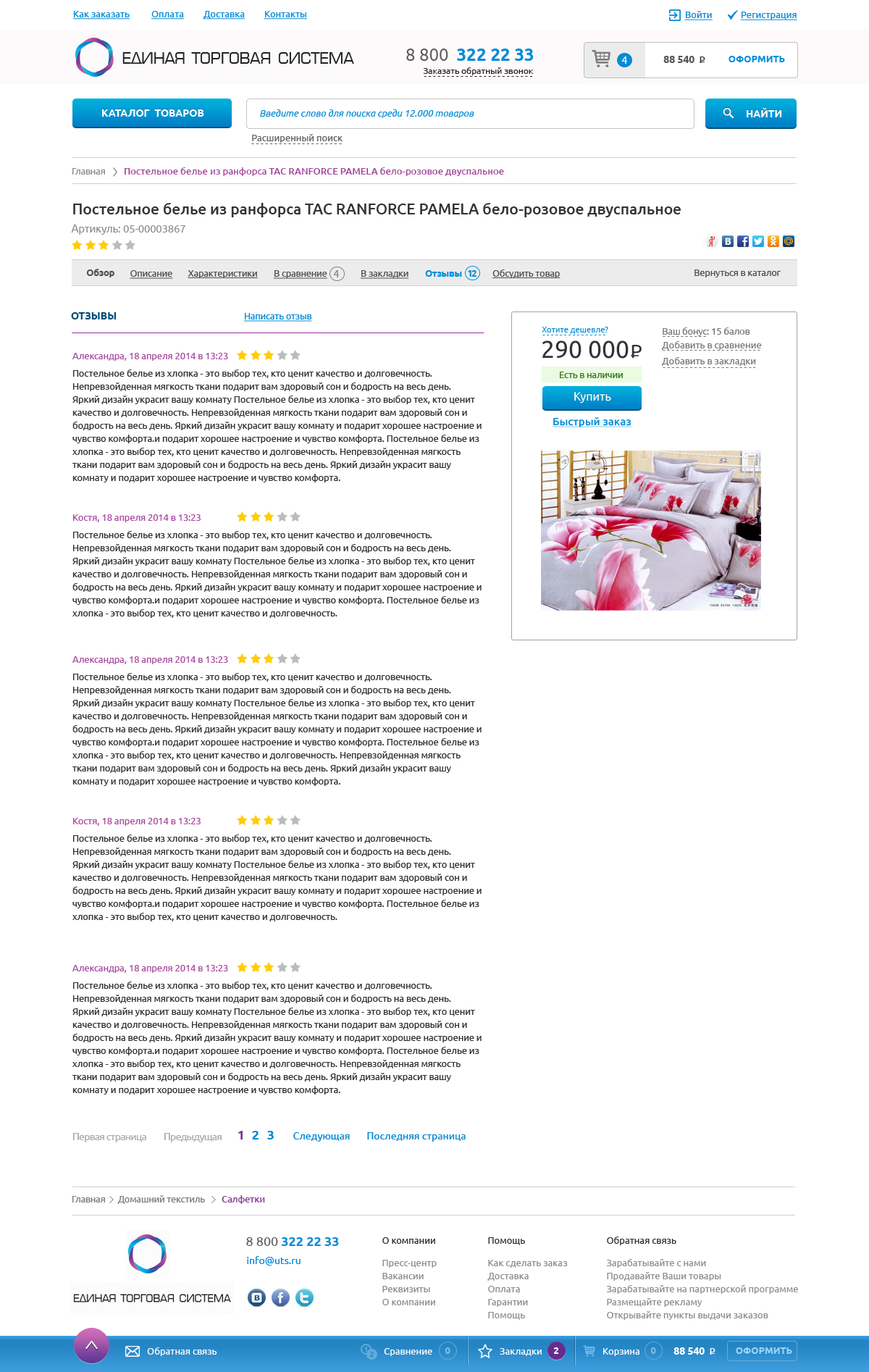
<style>
.page{position:relative;width:869px;height:1372px;background:#ffffff}
.page>*{position:absolute;margin:0}
.t1{font:9.4px "Ubuntu";color:#048bd5;text-decoration:underline}
.t2{font:9.4px "Ubuntu";color:#008bd5;text-decoration:underline}
.t3{font:17.4px "Ubuntu-Bold";color:#008cd9}
.t4{font:17.4px "Ubuntu";color:#5d5d5d}
.t5{font:10.1px "Ubuntu";color:#ffffff}
.t6{font:10.1px "Ubuntu-Bold";color:#585858}
.t7{font:9.4px "Ubuntu";color:#333333}
.t8{font:9.4px "Ubuntu-Bold";color:#008cd9;text-transform:uppercase}
.t9{font:8.7px "Ubuntu";color:#2a2a2a}
.t10{font:10.1px "Ubuntu-Bold";color:#ffffff;text-transform:uppercase}
.t11{font:9.4px "Ubuntu-Italic";color:#048bd5}
.t12{font:9.4px "Ubuntu";color:#626262}
.t13{font:8.7px "Ubuntu";color:#626262}
.t14{font:9.1px "Ubuntu";color:#8c8c8c}
.t15{font:9.4px "Ubuntu-Medium";color:#a3479b}
.t16{font:15.1px "Ubuntu-Medium";color:#333333}
.t17{font:10.5px "Ubuntu";color:#8c8c8c}
.t18{font:9.1px "Ubuntu-Bold";color:#505050}
.t19{font:9.1px "Ubuntu";color:#505050;text-decoration:underline}
.t20{font:9.1px "Ubuntu";color:#505050}
.t21{font:10.1px "Ubuntu";color:#838383}
.t22{font:9.1px "Ubuntu-Bold";color:#008cd9}
.t23{font:9.1px "Ubuntu-Bold";letter-spacing:-0.1em;color:#008cd9}
.t24{font:10.1px "Ubuntu-Bold";color:#014d76}
.t25{font:9.1px "Ubuntu";color:#008bd5;text-decoration:underline}
.t26{font:8.1px "Ubuntu";color:#008bd5}
.t27{font:9.1px "Ubuntu";color:#797979}
.t28{font:9.1px "Ubuntu-Medium";color:#797979}
.t29{font:24.1px "Ubuntu";color:#333333}
.t30{font:24.9px "Lato-Regular";color:#333333}
.t31{font:9.4px "Ubuntu";color:#797979}
.t32{font:9.4px "Ubuntu";letter-spacing:-0.025em;color:#797979}
.t33{font:9.1px/13px "Ubuntu";letter-spacing:0.01em;color:#333333}
.t34{font:9.1px/12.1px "Ubuntu";letter-spacing:0.01em;color:#aa4d9f}
.t35{font:9.1px/5.8px "Ubuntu";letter-spacing:0.01em;color:#333333}
.t36{font:18.6px "Ubuntu";color:#333333;scale:1.04 1}
.t37{font:15.1px "Ubuntu";scale:1.04 1}
.t38{font:9.1px "Ubuntu";color:#36771f}
.t39{font:12.4px "Ubuntu";color:#ffffff;scale:0.94 1}
.t40{font:12.4px "Ubuntu";color:#ffffff;text-transform:uppercase;scale:0.94 1}
.t41{font:10.6px "Ubuntu-Medium";color:#008bd5;text-decoration:underline}
.t42{font:10.1px "Ubuntu";letter-spacing:-0.05em;color:#ababab}
.t43{font:13px "Ubuntu-Bold";color:#753b90}
.t44{font:13px "Ubuntu-Bold";color:#0089d5}
.t45{font:10.1px "Ubuntu";color:#0087d1}
.t46{font:9.1px "Ubuntu";color:#7c7c7c}
.t47{font:9.1px "Ubuntu-Medium";color:#863d97}
.t48{font:13px "Ubuntu-Bold";color:#048bd5}
.t49{font:13px "Ubuntu";color:#5d5d5d}
.t50{font:9.4px/13px "Ubuntu";color:#8e8e8e}
.t51{font:9.4px/13px "Ubuntu";color:#323232}
.t52{font:10.1px "Ubuntu";color:#0289d7}
.t53{font:9.4px "Ubuntu";color:#ffffff}
.t54{font:7.2px "Ubuntu-Bold";color:#63abda}
.t55{font:9.4px "Ubuntu-Bold";color:#80bde5}
.t56{font:9.4px "Ubuntu-Bold";color:#ffffff}
.t57{font:10.1px "Ubuntu-Bold";color:#ffffff}
.t58{font:9.4px "Ubuntu-Bold";color:#9ad3f8;text-transform:uppercase}
.t59{font:7.2px "Ubuntu-Bold";color:#2586c4}
</style>
<div class="page">
<p class="t1" style="left:73px;top:11px;width:234px;height:9px"><span class="t2">Как заказать          </span>Оплата         Доставка         Контакты</p>
<p class="t1" style="left:684px;top:11px;width:29px;height:9px">Войти</p>
<p class="t1" style="left:740px;top:12px;width:57px;height:8px">Регистрация</p>
<p class="t3" style="left:406px;top:49px;width:128px;height:12px"><span class="t4">8 800  </span>322 22 33</p>
<p class="t5" style="left:621px;top:56px;width:6px;height:8px">4</p>
<p class="t6" style="left:663px;top:56px;width:32px;height:7px">88 540</p>
<p class="t7" style="left:700px;top:56px;width:5px;height:7px">P</p>
<p class="t7" style="left:700px;top:62px;width:5px;height:0px">_</p>
<p class="t8" style="left:729px;top:56px;width:56px;height:6px">Оформить</p>
<p class="t9" style="left:423px;top:67px;width:111px;height:8px">Заказать обратный звонок</p>
<p class="t9" style="left:424px;top:76px;width:109px;height:1px">- - - - - - - - - - - - - - - - - - - - - - - -</p>
<p class="t10" style="left:102px;top:109px;width:102px;height:8px">Каталог  товаров</p>
<p class="t11" style="left:260px;top:109px;width:214px;height:9px">Введите слово для поиска среди 12.000 товаров</p>
<p class="t10" style="left:747px;top:107px;width:35px;height:10px">НАЙТИ</p>
<p class="t12" style="left:252px;top:134px;width:91px;height:9px">Расширенный поиск</p>
<p class="t13" style="left:251px;top:143px;width:91px;height:1px">- - - - - - - - - - - - - - - - - - - -</p>
<p class="t14" style="left:72px;top:168px;width:33px;height:7px">Главная</p>
<p class="t15" style="left:125px;top:167px;width:379px;height:9px">Постельное белье из ранфорса TAC RANFORCE PAMELA бело-розовое двуспальное</p>
<p class="t16" style="left:73px;top:203px;width:608px;height:14px">Постельное белье из ранфорса TAC RANFORCE PAMELA бело-розовое двуспальное</p>
<p class="t17" style="left:71px;top:225px;width:114px;height:10px">Артикуль: 05-00003867</p>
<p class="t18" style="left:86px;top:269px;width:28px;height:8px">Обзор</p>
<p class="t19" style="left:493px;top:269px;width:68px;height:9px">Обсудить товар</p>
<p class="t20" style="left:695px;top:269px;width:86px;height:8px">Вернуться в каталог</p>
<p class="t19" style="left:130px;top:270px;width:43px;height:9px">Описание</p>
<p class="t19" style="left:188px;top:270px;width:70px;height:8px">Характеристики</p>
<p class="t19" style="left:274px;top:270px;width:53px;height:9px">В сравнение</p>
<p class="t21" style="left:333px;top:270px;width:6px;height:7px">4</p>
<p class="t19" style="left:361px;top:270px;width:48px;height:9px">В закладки</p>
<p class="t22" style="left:425px;top:270px;width:37px;height:7px">Отзывы</p>
<p class="t23" style="left:468px;top:270px;width:9px;height:7px">12</p>
<p class="t24" style="left:71px;top:312px;width:46px;height:7px">ОТЗЫВЫ</p>
<p class="t25" style="left:244px;top:313px;width:68px;height:9px">Написать отзыв</p>
<p class="t26" style="left:542px;top:327px;width:66px;height:7px">Хотите дешевле?</p>
<p class="t27" style="left:663px;top:327px;width:87px;height:9px">Ваш бонус: <span class="t28">15 балов</span></p>
<p class="t26" style="left:543px;top:335px;width:63px;height:0px">- - - - - - - - - - - - - - -</p>
<p class="t29" style="left:543px;top:340px;width:86px;height:19px"><span class="t30">   </span>290 000</p>
<p class="t31" style="left:662px;top:341px;width:100px;height:9px">Добавить в сравнение</p>
<p class="t32" style="left:663px;top:336px;width:43px;height:1px">- - - - - - - - - -</p>
<p class="t33" style="left:72px;top:353px;width:410px;height:129px"><span class="t34">Александра, 18 апреля 2014 в 13:23<br><br></span><span class="t35">Постельное белье из хлопка - это выбор тех, кто ценит качество и долговечность. </span>Непревзойденная мягкость ткани подарит вам здоровый сон и бодрость на весь день. <br>Яркий дизайн украсит вашу комнату Постельное белье из хлопка - это выбор тех, кто ценит качество и долговечность. Непревзойденная мягкость ткани подарит вам здоровый сон и бодрость на весь день. Яркий дизайн украсит вашу комнату и подарит хорошее настроение и чувство комфорта.и подарит хорошее настроение и чувство комфорта. Постельное белье из хлопка - это выбор тех, кто ценит качество и долговечность. Непревзойденная мягкость ткани подарит вам здоровый сон и бодрость на весь день. Яркий дизайн украсит вашу комнату и подарит хорошее настроение и чувство комфорта.</p>
<p class="t36" style="left:632px;top:345px;width:10px;height:13px">P</p>
<p class="t32" style="left:663px;top:350px;width:98px;height:1px">- - - - - - - - - - - - - - - - - - - - - -</p>
<p class="t37" style="left:631px;top:355px;width:8px;height:1px">_</p>
<p class="t31" style="left:662px;top:357px;width:94px;height:9px">Добавить в закладки</p>
<p class="t38" style="left:560px;top:372px;width:63px;height:6px">Есть в наличии</p>
<p class="t32" style="left:663px;top:367px;width:93px;height:1px">- - - - - - - - - - - - - - - - - - - - -</p>
<p class="t39" style="left:574px;top:392px;width:37px;height:11px"><span class="t40">К</span>упить</p>
<p class="t41" style="left:553px;top:417px;width:79px;height:10px">Быстрый заказ</p>
<p class="t33" style="left:72px;top:514px;width:410px;height:104px"><span class="t34">Костя, 18 апреля 2014 в 13:23<br><br></span><span class="t35">Постельное белье из хлопка - это выбор тех, кто ценит качество и долговечность. </span>Непревзойденная мягкость ткани подарит вам здоровый сон и бодрость на весь день. <br>Яркий дизайн украсит вашу комнату Постельное белье из хлопка - это выбор тех, кто ценит качество и долговечность. Непревзойденная мягкость ткани подарит вам здоровый сон и бодрость на весь день. Яркий дизайн украсит вашу комнату и подарит хорошее настроение и чувство комфорта.и подарит хорошее настроение и чувство комфорта. Постельное белье из хлопка - это выбор тех, кто ценит качество и долговечность.</p>
<p class="t33" style="left:72px;top:656px;width:410px;height:130px"><span class="t34">Александра, 18 апреля 2014 в 13:23<br><br></span><span class="t35">Постельное белье из хлопка - это выбор тех, кто ценит качество и долговечность. </span>Непревзойденная мягкость ткани подарит вам здоровый сон и бодрость на весь день. <br>Яркий дизайн украсит вашу комнату Постельное белье из хлопка - это выбор тех, кто ценит качество и долговечность. Непревзойденная мягкость ткани подарит вам здоровый сон и бодрость на весь день. Яркий дизайн украсит вашу комнату и подарит хорошее настроение и чувство комфорта.и подарит хорошее настроение и чувство комфорта. Постельное белье из хлопка - это выбор тех, кто ценит качество и долговечность. Непревзойденная мягкость ткани подарит вам здоровый сон и бодрость на весь день. Яркий дизайн украсит вашу комнату и подарит хорошее настроение и чувство комфорта.</p>
<p class="t33" style="left:72px;top:818px;width:410px;height:103px"><span class="t34">Костя, 18 апреля 2014 в 13:23<br><br></span><span class="t35">Постельное белье из хлопка - это выбор тех, кто ценит качество и долговечность. </span>Непревзойденная мягкость ткани подарит вам здоровый сон и бодрость на весь день. <br>Яркий дизайн украсит вашу комнату Постельное белье из хлопка - это выбор тех, кто ценит качество и долговечность. Непревзойденная мягкость ткани подарит вам здоровый сон и бодрость на весь день. Яркий дизайн украсит вашу комнату и подарит хорошее настроение и чувство комфорта.и подарит хорошее настроение и чувство комфорта. Постельное белье из хлопка - это выбор тех, кто ценит качество и долговечность.</p>
<p class="t33" style="left:72px;top:965px;width:410px;height:129px"><span class="t34">Александра, 18 апреля 2014 в 13:23<br><br></span><span class="t35">Постельное белье из хлопка - это выбор тех, кто ценит качество и долговечность. </span>Непревзойденная мягкость ткани подарит вам здоровый сон и бодрость на весь день. <br>Яркий дизайн украсит вашу комнату Постельное белье из хлопка - это выбор тех, кто ценит качество и долговечность. Непревзойденная мягкость ткани подарит вам здоровый сон и бодрость на весь день. Яркий дизайн украсит вашу комнату и подарит хорошее настроение и чувство комфорта.и подарит хорошее настроение и чувство комфорта. Постельное белье из хлопка - это выбор тех, кто ценит качество и долговечность. Непревзойденная мягкость ткани подарит вам здоровый сон и бодрость на весь день. Яркий дизайн украсит вашу комнату и подарит хорошее настроение и чувство комфорта.</p>
<p class="t42" style="left:73px;top:1133px;width:73px;height:9px">Первая страница</p>
<p class="t42" style="left:164px;top:1133px;width:58px;height:9px">Предыдущая</p>
<p class="t43" style="left:238px;top:1131px;width:5px;height:8px">1</p>
<p class="t44" style="left:252px;top:1131px;width:7px;height:8px">2</p>
<p class="t44" style="left:267px;top:1131px;width:7px;height:8px">3</p>
<p class="t45" style="left:293px;top:1132px;width:57px;height:10px">Следующая</p>
<p class="t45" style="left:367px;top:1132px;width:99px;height:10px">Последняя страница</p>
<p class="t46" style="left:72px;top:1195px;width:193px;height:9px">Главная      Домашний текстиль        <span class="t47">Салфетки</span></p>
<p class="t48" style="left:246px;top:1237px;width:93px;height:9px"><span class="t49">8 800 </span>322 22 33</p>
<p class="t50" style="left:382px;top:1237px;width:55px;height:68px"><span class="t51">О компании<br></span>Пресс-центр<br>Вакансии<br>Реквизиты<br>О компании</p>
<p class="t50" style="left:487px;top:1237px;width:81px;height:83px"><span class="t51">Помощь<br></span>Как сделать заказ<br>Доставка<br>Оплата<br>Гарантии<br>Помощь</p>
<p class="t50" style="left:606px;top:1236px;width:192px;height:84px"><span class="t51">Обратная связь<br></span>Зарабатывайте с нами<br>Продавайте Ваши товары<br>Зарабатывайте на партнерской программе<br>Размещайте рекламу<br>Открывайте пункты выдачи заказов</p>
<p class="t52" style="left:247px;top:1256px;width:54px;height:9px">info@uts.ru</p>
<p class="t53" style="left:147px;top:1347px;width:70px;height:9px">Обратная связь</p>
<p class="t54" style="left:364px;top:1347px;width:3px;height:5px">1</p>
<p class="t53" style="left:384px;top:1348px;width:48px;height:8px">Сравнение</p>
<p class="t55" style="left:445px;top:1347px;width:6px;height:7px">0</p>
<p class="t53" style="left:500px;top:1348px;width:42px;height:8px">Закладки</p>
<p class="t56" style="left:553px;top:1347px;width:6px;height:7px">2</p>
<p class="t53" style="left:603px;top:1348px;width:37px;height:8px">Корзина</p>
<p class="t55" style="left:650px;top:1347px;width:6px;height:7px">0</p>
<p class="t57" style="left:674px;top:1347px;width:31px;height:7px">88 540</p>
<p class="t53" style="left:710px;top:1348px;width:6px;height:6px">P</p>
<p class="t58" style="left:736px;top:1347px;width:56px;height:7px">Оформить</p>
<p class="t59" style="left:370px;top:1352px;width:4px;height:5px">2</p>
<p class="t53" style="left:710px;top:1353px;width:5px;height:1px">_</p>
</div>
